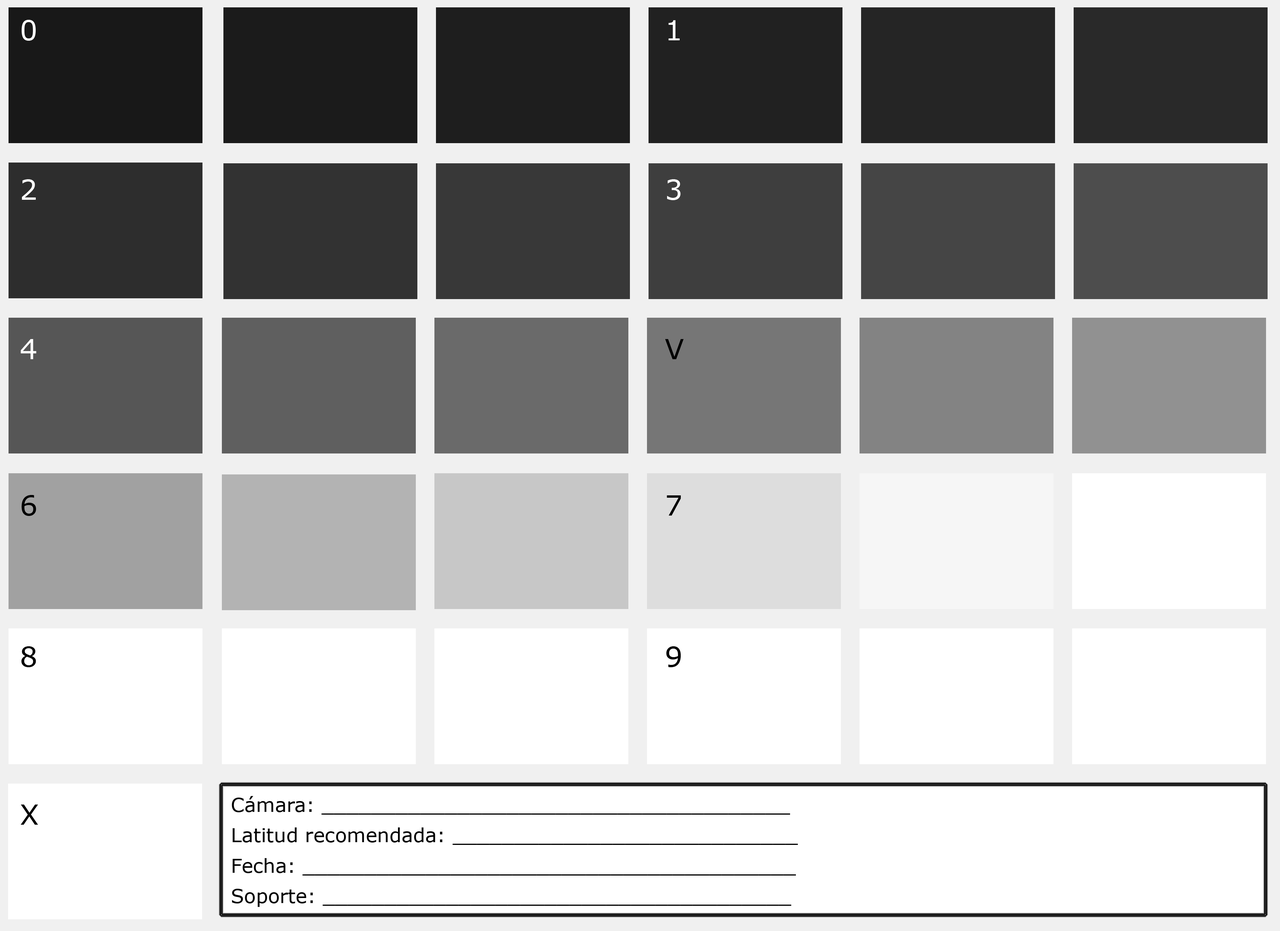
<style>
.page{position:relative;width:1280px;height:931px;background:#ffffff}
.page>*{position:absolute;margin:0}
.t1{font:27.9px "Verdana";color:#ffffff}
.t2{font:27.9px "Verdana";color:#000000}
.t3{font:19.4px "Verdana";color:#000000}
</style>
<div class="page">
<p class="t1" style="left:21px;top:20px;width:15px;height:21px">0</p>
<p class="t1" style="left:669px;top:20px;width:11px;height:20px">1</p>
<p class="t1" style="left:22px;top:179px;width:14px;height:21px">2</p>
<p class="t1" style="left:667px;top:179px;width:14px;height:21px">3</p>
<p class="t1" style="left:21px;top:339px;width:15px;height:20px">4</p>
<p class="t2" style="left:665px;top:339px;width:19px;height:20px">V</p>
<p class="t2" style="left:21px;top:495px;width:15px;height:21px">6</p>
<p class="t2" style="left:667px;top:496px;width:14px;height:20px">7</p>
<p class="t2" style="left:21px;top:646px;width:15px;height:21px">8</p>
<p class="t2" style="left:667px;top:646px;width:14px;height:21px">9</p>
<p class="t3" style="left:232px;top:796px;width:558px;height:19px">Cámara: ______________________________________</p>
<p class="t2" style="left:21px;top:805px;width:17px;height:20px">X</p>
<p class="t3" style="left:232px;top:828px;width:566px;height:17px">Latitud recomendada: ____________________________</p>
<p class="t3" style="left:232px;top:858px;width:564px;height:18px">Fecha: ________________________________________</p>
<p class="t3" style="left:232px;top:889px;width:560px;height:18px">Soporte: ______________________________________</p>
</div>
